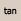
<style>
.page{position:relative;width:21px;height:21px;background:#d9cdc1}
.page>*{position:absolute;margin:0}
.t1{font:9px "Tahoma";color:#000000}
</style>
<div class="page">
<p class="t1" style="left:4px;top:7px;width:13px;height:8px">tan</p>
</div>
